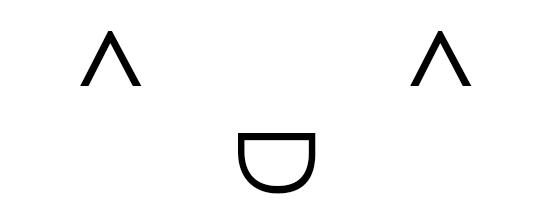
<style>
.page{position:relative;width:549px;height:215px;background:#ffffff}
.page>*{position:absolute;margin:0}
.t1{font:142.8px "NirmalaUI-Semilight";color:#000000}
.t2{font:110.4px "NirmalaUI-Semilight";color:#000000}
</style>
<div class="page">
<p class="t1" style="left:80px;top:31px;width:392px;height:55px">^      ^</p>
<p class="t2" style="left:238px;top:133px;width:78px;height:61px;rotate:90deg">D</p>
</div>
